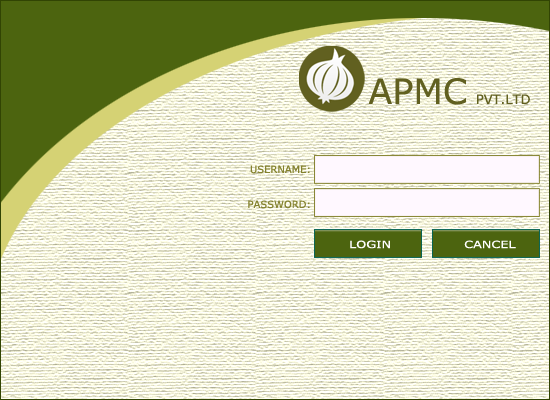
<style>
.page{position:relative;width:550px;height:400px}
.page>*{position:absolute;margin:0}
.t1{font:35px "Verdana";color:#616020}
.t2{font:13px "Verdana";color:#616020}
.t3{font:10px "Verdana";color:#84822e}
.t4{font:10px "Verdana";color:#ffffff;scale:1.28 1}
</style>
<div class="page">
<p class="t1" style="left:368px;top:78px;width:98px;height:27px">APMC</p>
<p class="t2" style="left:477px;top:94px;width:53px;height:10px">PVT.LTD</p>
<p class="t3" style="left:250px;top:165px;width:60px;height:9px">USERNAME:</p>
<p class="t3" style="left:248px;top:200px;width:62px;height:9px">PASSWORD:</p>
<p class="t4" style="left:350px;top:240px;width:40px;height:9px">LOGIN</p>
<p class="t4" style="left:464px;top:240px;width:52px;height:9px">CANCEL</p>
</div>
